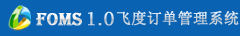
<style>
.page{position:relative;width:240px;height:36px;background:#0a62b2}
.page>*{position:absolute;margin:0}
.t1{font:18px "Algerian";color:#ffffff;font-weight:bold}
.t2{font:18px "LucidaFax";font-weight:bold}
.t3{font:15px "SimSun";color:#c9d4df;font-weight:bold}
</style>
<div class="page">
<p class="t1" style="left:36px;top:12px;width:46px;height:14px">FOMS</p>
<p class="t2" style="left:88px;top:11px;width:26px;height:15px">1.0</p>
<p class="t3" style="left:116px;top:10px;width:123px;height:16px">飞度订单管理系统</p>
</div>
